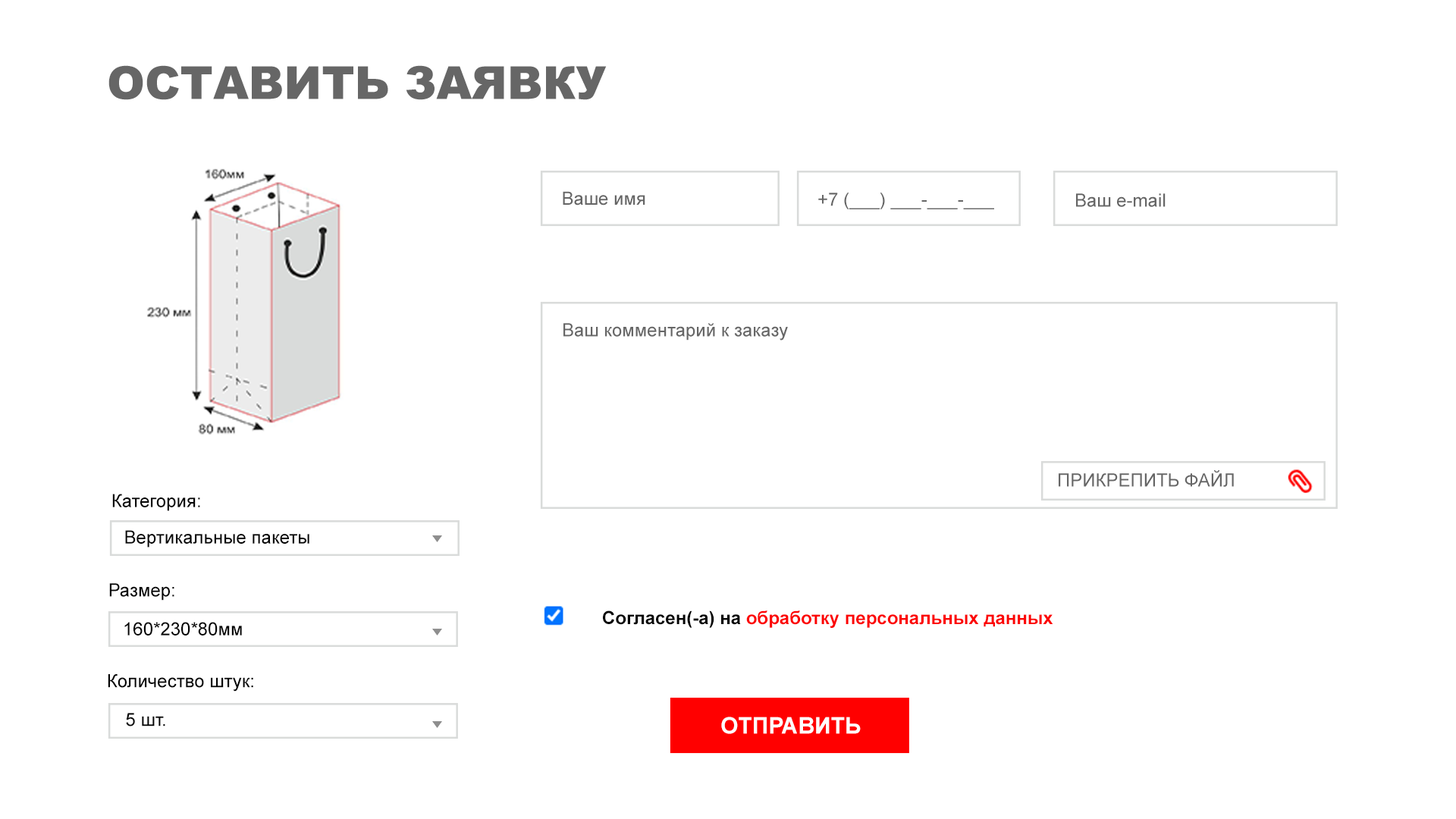
<style>
.page{position:relative;width:1456px;height:819px;background:#ffffff}
.page>*{position:absolute;margin:0}
.t1{font:45.5px "Arial-Black";color:#666666}
.t2{font:18.2px "ArialMT";color:#666666}
.t3{font:18.2px "ArialMT";color:#040404}
.t4{font:18.2px "Arial-BoldMT";color:#fc0404}
.t5{font:18.2px "Arial-BoldMT";color:#060606}
.t6{font:22.7px "Arial-BoldMT";color:#fefcfc}
</style>
<div class="page">
<p class="t1" style="left:108px;top:65px;width:499px;height:35px">ОСТАВИТЬ ЗАЯВКУ</p>
<p class="t2" style="left:563px;top:191px;width:82px;height:15px">Ваше имя</p>
<p class="t2" style="left:818px;top:193px;width:176px;height:16px">+7 (___) ___-___-___</p>
<p class="t2" style="left:1076px;top:193px;width:90px;height:14px">Ваш e-mail</p>
<p class="t2" style="left:563px;top:323px;width:225px;height:17px">Ваш комментарий к заказу</p>
<p class="t2" style="left:1059px;top:470px;width:175px;height:17px">ПРИКРЕПИТЬ ФАЙЛ</p>
<p class="t3" style="left:112px;top:494px;width:88px;height:17px">Категория:</p>
<p class="t3" style="left:125px;top:530px;width:184px;height:18px">Вертикальные пакеты</p>
<p class="t3" style="left:109px;top:583px;width:65px;height:18px">Размер:</p>
<p class="t4" style="left:603px;top:610px;width:450px;height:18px"><span class="t5">Согласен(-а) на </span>обработку персональных данных</p>
<p class="t3" style="left:124px;top:622px;width:118px;height:13px">160*230*80мм</p>
<p class="t3" style="left:108px;top:674px;width:145px;height:18px">Количество штук:</p>
<p class="t3" style="left:126px;top:713px;width:39px;height:13px">5 шт.</p>
<p class="t6" style="left:721px;top:717px;width:140px;height:17px">ОТПРАВИТЬ</p>
</div>
